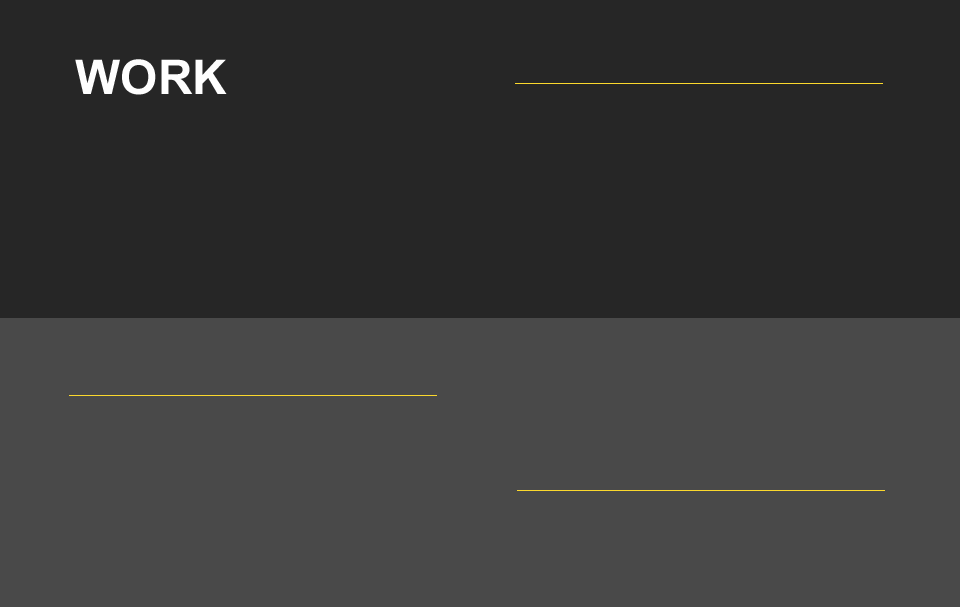
<style>
.page{position:relative;width:960px;height:607px;background:#262626}
.page>*{position:absolute;margin:0}
.t1{font:66.7px "Utsaah-Bold";color:#fefefe}
</style>
<div class="page">
<p class="t1" style="left:75px;top:59px;width:152px;height:36px">WORK</p>
</div>
